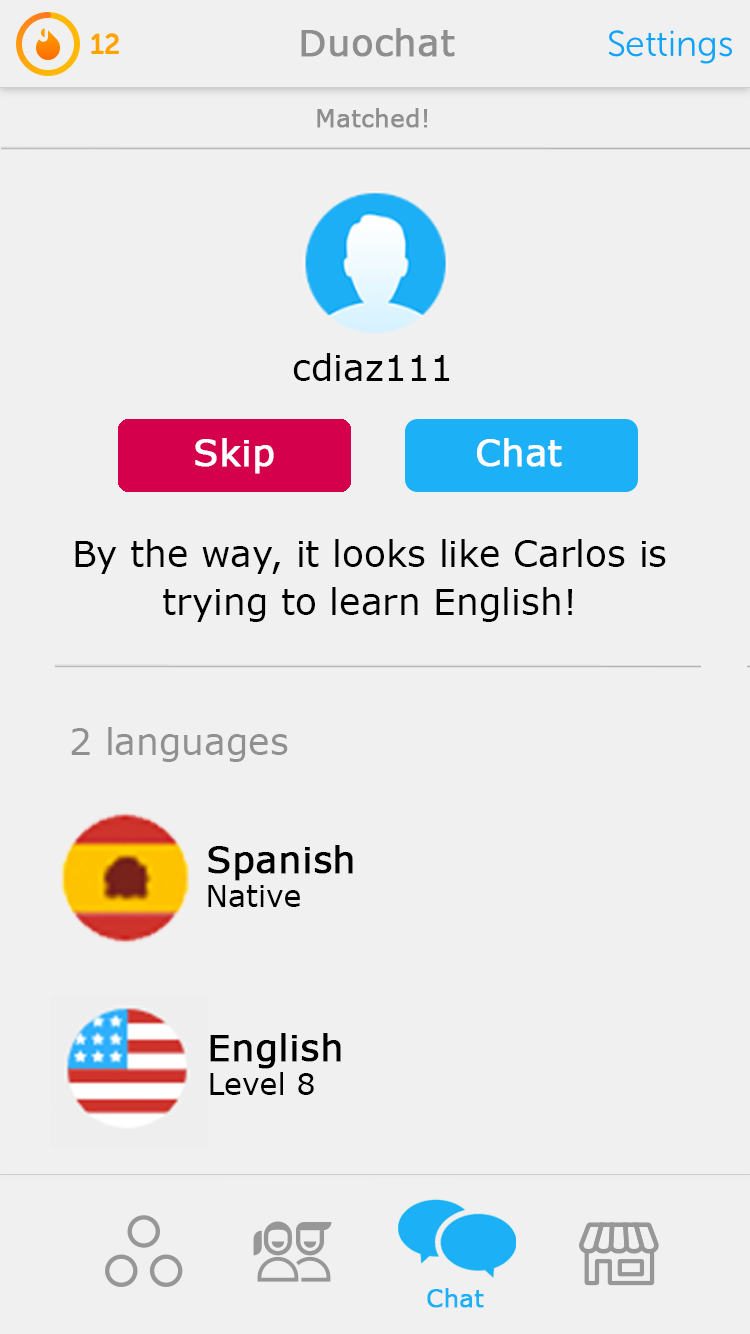
<style>
.page{position:relative;width:750px;height:1334px;background:#f0f0f0}
.page>*{position:absolute;margin:0}
.t1{font:36px "MSReferenceSansSerif";color:#8e8e8e;font-weight:bold}
.t2{font:24px "MSReferenceSansSerif";color:#8e8e8e;font-weight:bold}
.t3{font:36px "MSReferenceSansSerif";color:#000000}
.t4{font:36px "MSReferenceSansSerif";color:#ffffff;font-weight:bold}
.t5{font:36px/48px "MSReferenceSansSerif";color:#000000}
.t6{font:36px "MSReferenceSansSerif";color:#909090}
.t7{font:36px "MSReferenceSansSerif";color:#000000;font-weight:bold}
.t8{font:30px "MSReferenceSansSerif";color:#000000}
.t9{font:24px "MSReferenceSansSerif";color:#1cb0f6;font-weight:bold}
</style>
<div class="page">
<p class="t1" style="left:301px;top:28px;width:154px;height:29px">Duochat</p>
<p class="t2" style="left:317px;top:108px;width:111px;height:20px">Matched!</p>
<p class="t3" style="left:293px;top:353px;width:157px;height:28px">cdiaz111</p>
<p class="t4" style="left:195px;top:438px;width:79px;height:36px">Skip</p>
<p class="t4" style="left:477px;top:438px;width:85px;height:29px">Chat</p>
<p class="t5" style="left:75px;top:539px;width:591px;height:83px;text-align:center">By the way, it looks like Carlos is trying to learn English!</p>
<p class="t6" style="left:71px;top:727px;width:217px;height:35px">2 languages</p>
<p class="t7" style="left:208px;top:845px;width:145px;height:36px">Spanish</p>
<p class="t8" style="left:208px;top:885px;width:92px;height:22px">Native</p>
<p class="t7" style="left:210px;top:1033px;width:131px;height:36px">English</p>
<p class="t8" style="left:210px;top:1072px;width:104px;height:23px">Level 8</p>
<p class="t9" style="left:427px;top:1288px;width:57px;height:20px">Chat</p>
</div>
